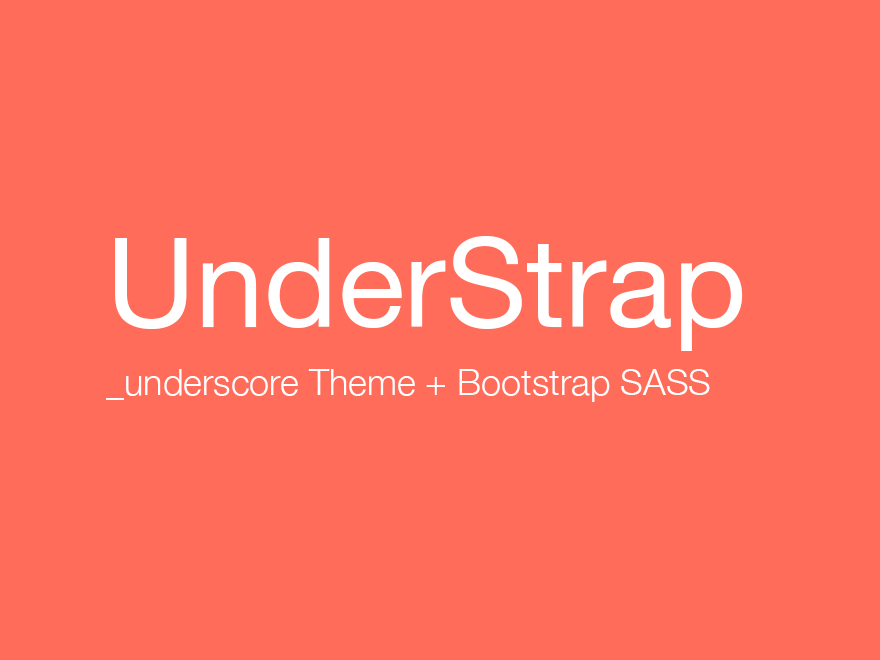
<style>
.page{position:relative;width:880px;height:660px;background:#ff6d5a}
.page>*{position:absolute;margin:0}
.t1{font:124px "HelveticaNeue";color:#ffffff}
.t2{font:36px "HelveticaNeue-Light";color:#ffffff}
</style>
<div class="page">
<p class="t1" style="left:115px;top:236px;width:628px;height:115px">UnderStrap</p>
<p class="t2" style="left:106px;top:369px;width:604px;height:33px">_underscore Theme + Bootstrap SASS</p>
</div>
